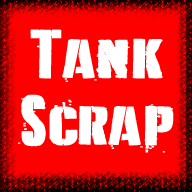
<style>
.page{position:relative;width:192px;height:192px;background:#ff0000}
.page>*{position:absolute;margin:0}
.t1{font:75px/66.7px "DDayStencil";color:#ffffff;font-weight:bold}
</style>
<div class="page">
<p class="t1" style="left:18px;top:29px;width:156px;height:124px;text-align:center">Tank<br>Scrap</p>
</div>
